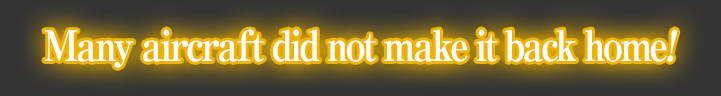
<style>
.page{position:relative;width:721px;height:96px}
.page>*{position:absolute;margin:0}
.t1{font:42px "RyuminPro-ExBold";letter-spacing:-0.08em;color:#ffffff;scale:0.9 1}
.t2{font:42px "RyuminPro-ExBold";letter-spacing:-0.08em;color:#ffffff;font-style:italic;scale:0.9 1}
</style>
<div class="page">
<p class="t1" style="left:44px;top:29px;width:634px;height:39px">Many aircraft did not make it back home<span class="t2">!</span></p>
</div>
